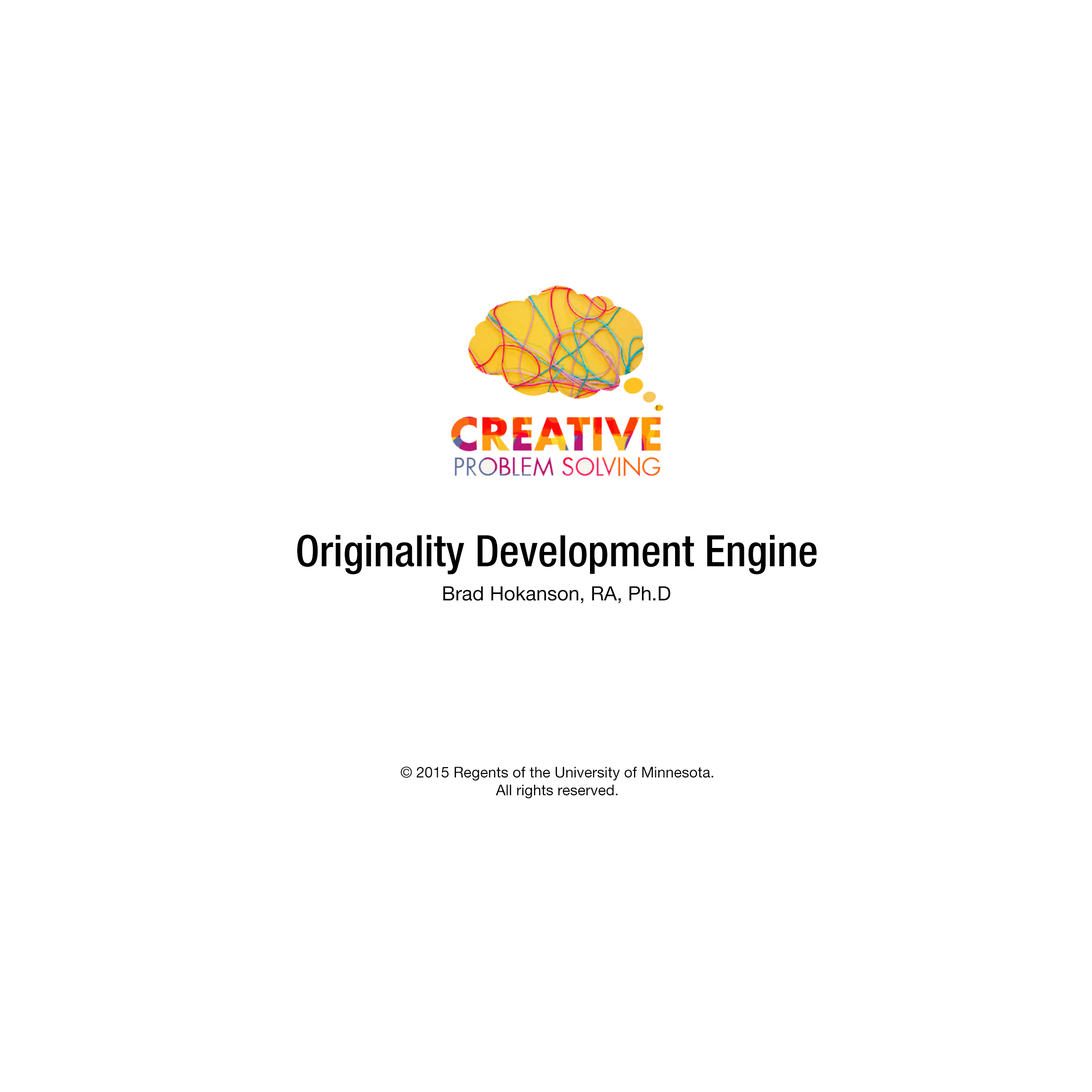
<style>
.page{position:relative;width:1092px;height:1092px;background:#ffffff}
.page>*{position:absolute;margin:0}
.t1{font:43.5px "HelveticaNeueLTStd-MdCn";color:#000000}
.t2{font:19.8px "HelveticaNeueLTStd-Roman";color:#000000}
.t3{font:14.8px "HelveticaNeueLTStd-Roman";color:#000000}
</style>
<div class="page">
<p class="t1" style="left:297px;top:535px;width:520px;height:40px">Originality Development Engine</p>
<p class="t2" style="left:443px;top:586px;width:228px;height:17px">Brad Hokanson, RA, Ph.D</p>
<p class="t3" style="left:401px;top:767px;width:312px;height:32px;text-align:center">© 2015 Regents of the University of Minnesota.<br>All rights reserved.</p>
</div>
